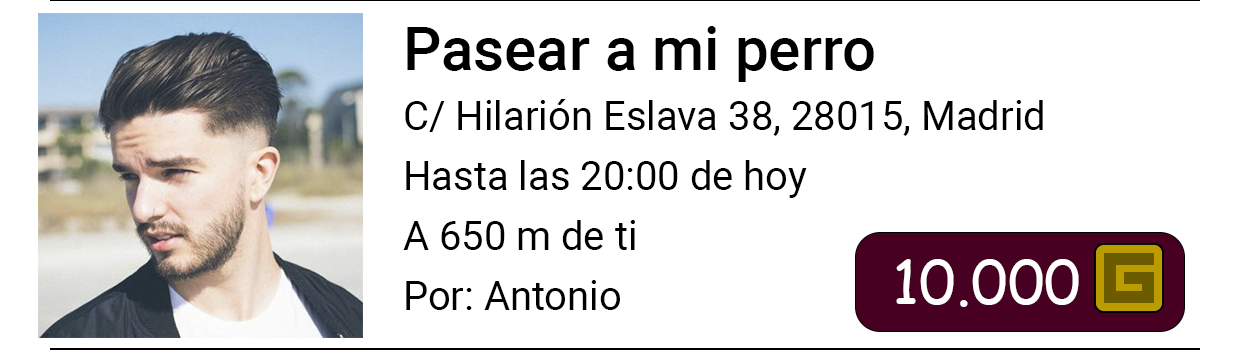
<style>
.page{position:relative;width:1250px;height:350px;background:#ffffff}
.page>*{position:absolute;margin:0}
.t1{font:40px "Roboto-Regular";color:#000000}
.t2{font:60px "Roboto-Medium";color:#000000}
.t3{font:60px "ComicSansMS";color:#ffffff}
</style>
<div class="page">
<p class="t1" style="left:403px;top:26px;width:640px;height:284px"><span class="t2">Pasear a mi perro<br><br></span>C/ Hilarión Eslava 38, 28015, Madrid<br><br>Hasta las 20:00 de hoy<br><br>A 650 m de ti<br><br>Por: Antonio</p>
<p class="t3" style="left:896px;top:259px;width:183px;height:48px">10.000</p>
</div>
